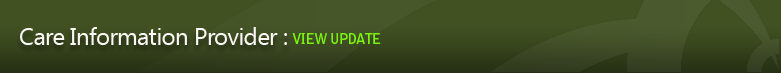
<style>
.page{position:relative;width:781px;height:73px;background:#415122}
.page>*{position:absolute;margin:0}
.t1{font:24px "SegoeUI";letter-spacing:-0.025em;color:#faf7f5}
.t2{font:14px "BellGothicStd-Bold";letter-spacing:-0.05em;color:#7af40e}
</style>
<div class="page">
<p class="t1" style="left:20px;top:27px;width:267px;height:18px">Care Information Provider :</p>
<p class="t2" style="left:292px;top:33px;width:89px;height:11px">VIEW UPDATE</p>
</div>
